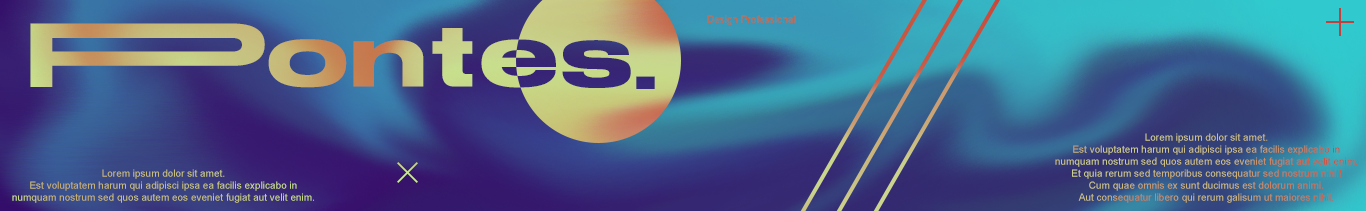
<style>
.page{position:relative;width:1366px;height:211px}
.page>*{position:absolute;margin:0}
.t1{font:10px "ArialMT";color:#c66848}
.t2{font:90px "StretchProRegular"}
.t3{font:10px "ArialMT"}
.t4{font:10px "ArialMT";color:#c6bd7d}
</style>
<div class="page">
<p class="t1" style="left:707px;top:15px;width:89px;height:10px">Design Professional</p>
<p class="t2" style="left:30px;top:23px;width:625px;height:66px">PPontes.</p>
<p class="t3" style="left:1055px;top:133px;width:302px;height:70px;text-align:center">Lorem ipsum dolor sit amet.<br>Est voluptatem harum qui adipisci ipsa ea facilis explicabo in<br>numquam nostrum sed quos autem eos eveniet fugiat aut velit enim.<br>Et quia rerum sed temporibus consequatur sed nostrum nihil!<br>Cum quae omnis ex sunt ducimus est dolorum animi.<br>Aut consequatur libero qui rerum galisum ut maiores nihil.</p>
<p class="t4" style="left:12px;top:169px;width:302px;height:34px;text-align:center">Lorem ipsum dolor sit amet.<br>Est voluptatem harum qui adipisci ipsa ea facilis explicabo in<br>numquam nostrum sed quos autem eos eveniet fugiat aut velit enim.</p>
</div>
